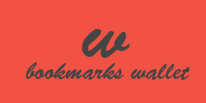
<style>
.page{position:relative;width:206px;height:103px;background:#f25244}
.page>*{position:absolute;margin:0}
.t1{font:72px "BrushScriptStd";color:#454545}
.t2{font:24px "BrushScriptStd";color:#454545}
</style>
<div class="page">
<p class="t1" style="left:82px;top:29px;width:48px;height:29px">w</p>
<p class="t2" style="left:26px;top:62px;width:164px;height:18px">bookmarks wallet</p>
</div>
